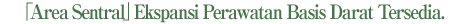
<style>
.page{position:relative;width:472px;height:24px;background:#ffffff}
.page>*{position:absolute;margin:0}
.t1{font:20px "RyuminPro-ExBold";letter-spacing:-0.08em;color:#46754a;scale:0.9 1}
</style>
<div class="page">
<p class="t1" style="left:26px;top:2px;width:419px;height:21px">「Area Sentral」Ekspansi Perawatan Basis Darat Tersedia.</p>
</div>
